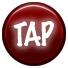
<style>
.page{position:relative;width:68px;height:68px;background:#ffffff}
.page>*{position:absolute;margin:0}
.t1{font:29.2px "MarkerFelt-Thin";letter-spacing:-0.025em;color:#ffffff}
</style>
<div class="page">
<p class="t1" style="left:13px;top:21px;width:41px;height:26px">TAP</p>
</div>
